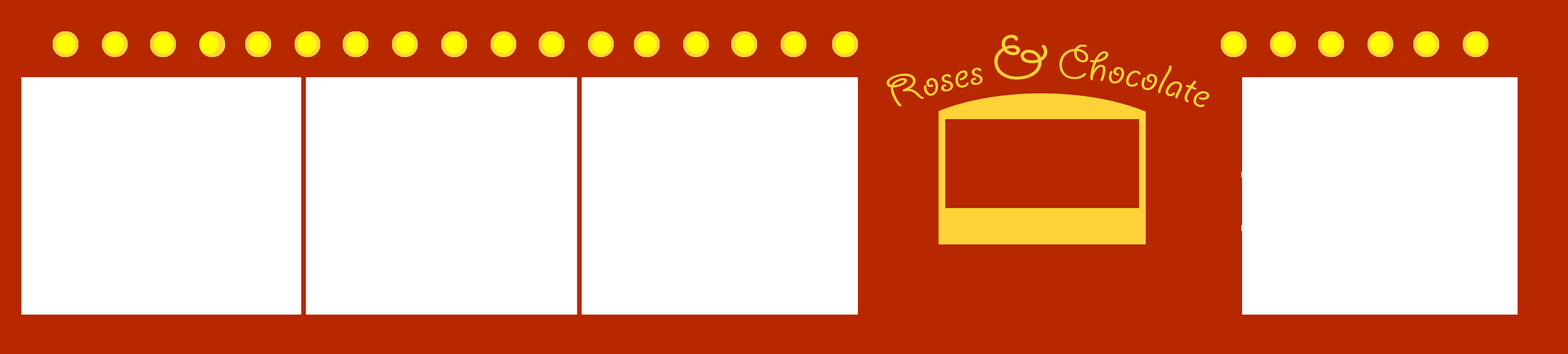
<style>
.page{position:relative;width:1568px;height:354px;background:#ffffff}
.page>*{position:absolute;margin:0}
.t1{font:47.3px "GiddyupStd";color:#ffd338}
.t2{font:67.2px "GiddyupStd";color:#ffd338}
</style>
<div class="page">
<p class="t1" style="left:886px;top:35px;width:324px;height:73px">Roses <span class="t2">&amp;</span> Chocolate</p>
</div>
